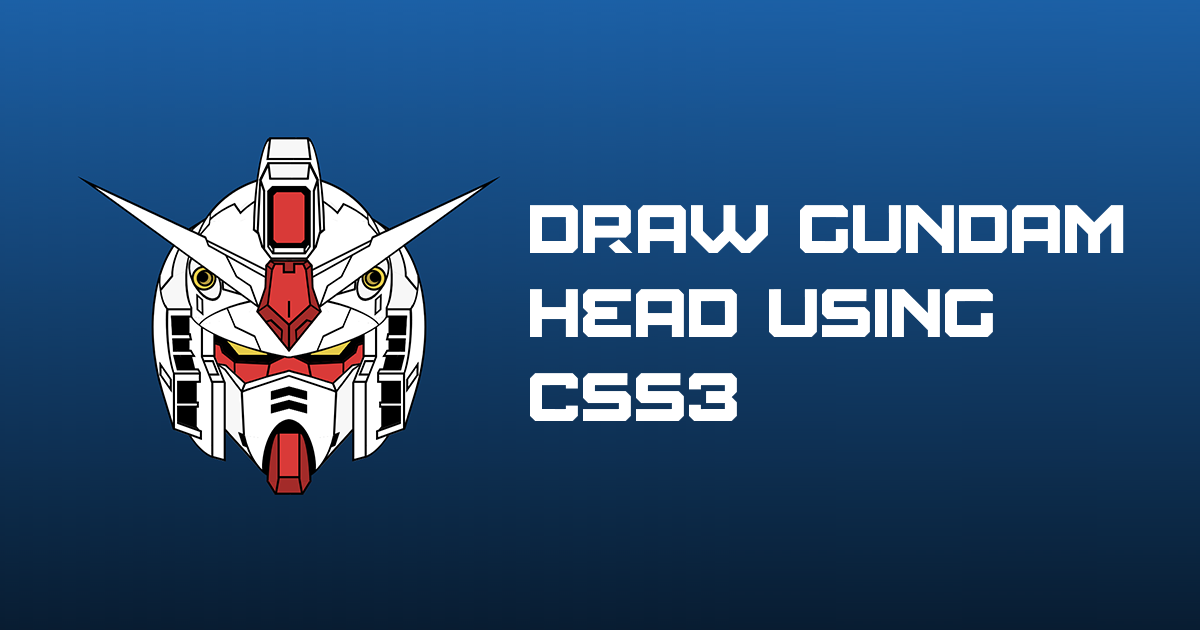
<style>
.page{position:relative;width:1200px;height:630px}
.page>*{position:absolute;margin:0}
.t1{font:70px "Amuro";color:#ffffff;text-transform:uppercase}
.t2{font:70px "Amuro";color:#ffffff}
</style>
<div class="page">
<p class="t1" style="left:530px;top:205px;width:594px;height:216px">Draw Gundam<br>Head using<br><span class="t2">CSS3</span></p>
</div>
